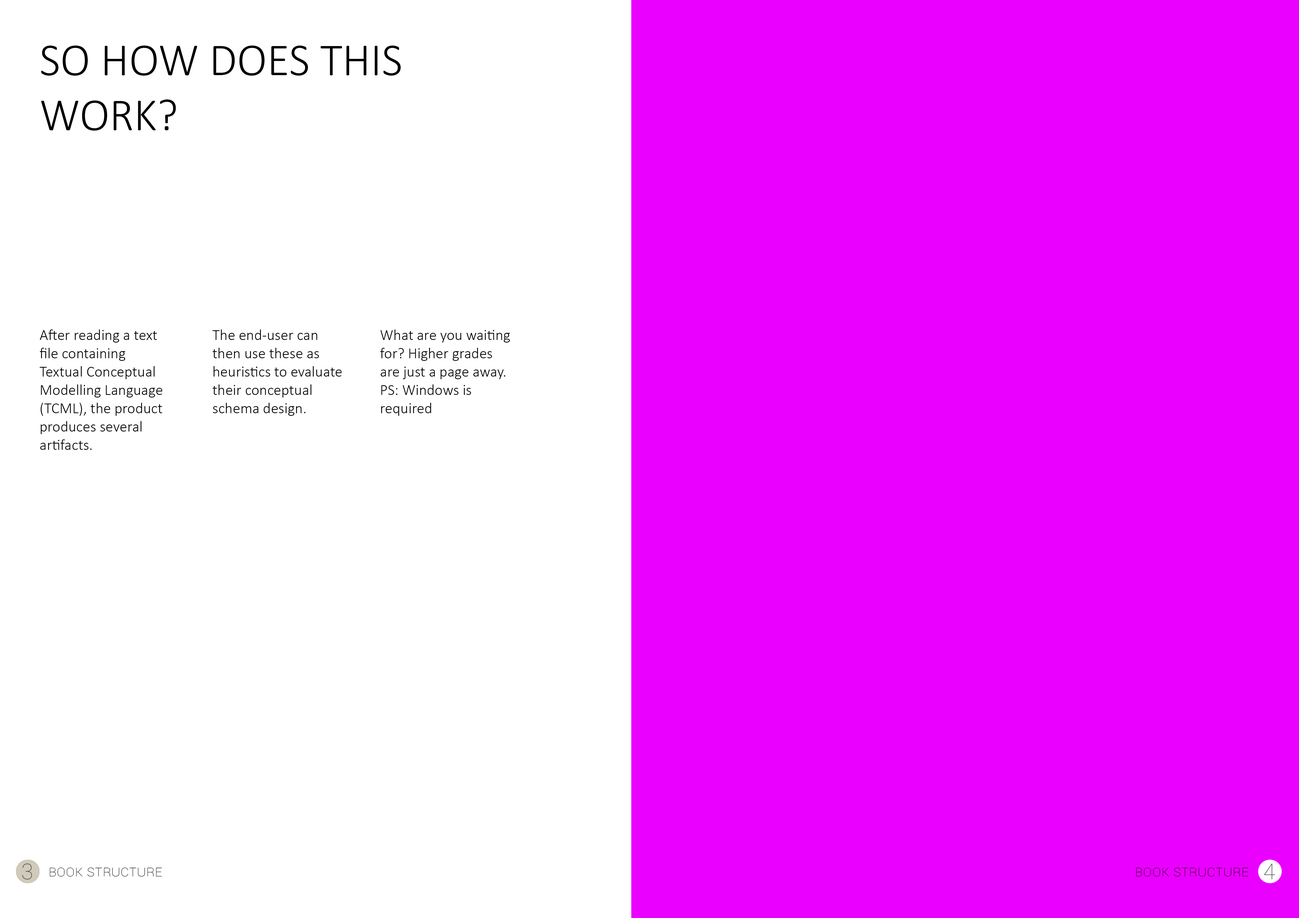
<style>
.page{position:relative;width:1299px;height:918px;background:#ea00ff}
.page>*{position:absolute;margin:0}
.t1{font:45.8px "Calibri-Light";color:#000000;text-transform:uppercase}
.t2{font:15.3px "Calibri-Light";color:#000000}
.t3{font:21.8px "Roboto-Thin";color:#484848}
.t4{font:15.3px "Roboto-Thin";color:#000000;font-variant:small-caps}
</style>
<div class="page">
<p class="t1" style="left:41px;top:46px;width:360px;height:85px">So how does this work?</p>
<p class="t2" style="left:40px;top:330px;width:122px;height:120px">After reading a text file containing Textual Conceptual Modelling Language (TCML), the product produces several artifacts.</p>
<p class="t2" style="left:212px;top:330px;width:130px;height:86px">The end-user can then use these as heuristics to evaluate their conceptual schema design.</p>
<p class="t2" style="left:380px;top:330px;width:130px;height:86px">What are you waiting for? Higher grades are just a page away.<br>PS: Windows is required</p>
<p class="t3" style="left:22px;top:864px;width:10px;height:16px">3</p>
<p class="t4" style="left:50px;top:868px;width:112px;height:9px">Book structure</p>
<p class="t4" style="left:1136px;top:868px;width:112px;height:9px">Book structure</p>
<p class="t3" style="left:1264px;top:864px;width:11px;height:16px">4</p>
</div>
